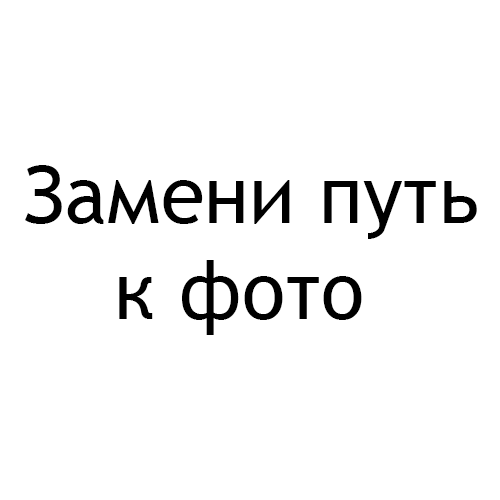
<style>
.page{position:relative;width:500px;height:500px;background:#ffffff}
.page>*{position:absolute;margin:0}
.t1{font:80px "TrebuchetMS";color:#000000}
</style>
<div class="page">
<p class="t1" style="left:25px;top:165px;width:452px;height:170px;text-align:center">Замени путь<br>к фото</p>
</div>
